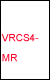
<style>
.page{position:relative;width:50px;height:80px;background:#ffffff}
.page>*{position:absolute;margin:0}
.t1{font:10px/20px "ArialMT";color:#f6072e}
</style>
<div class="page">
<p class="t1" style="left:1px;top:34px;width:38px;height:28px">VRCS4-<br>MR</p>
</div>
